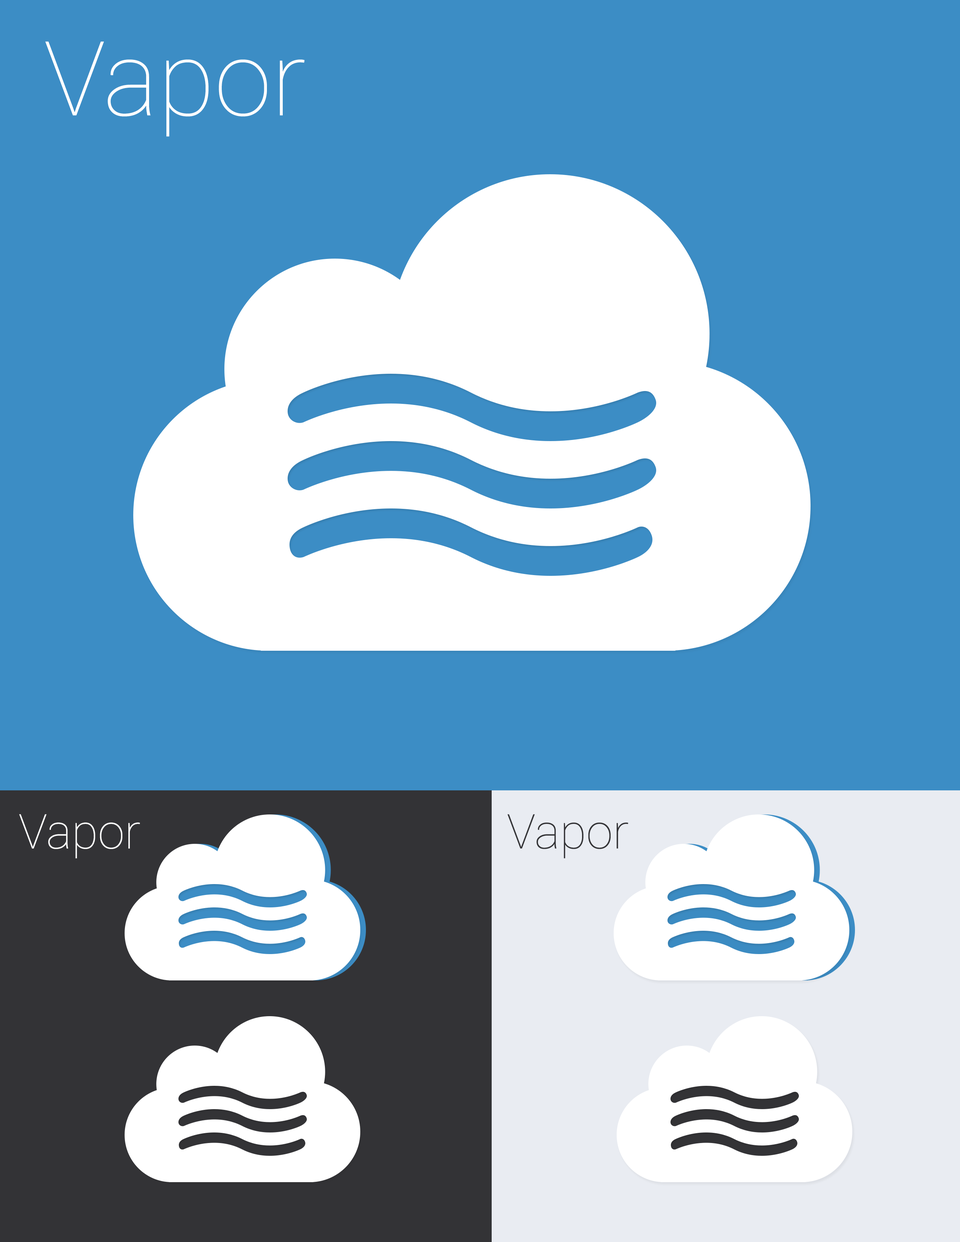
<style>
.page{position:relative;width:960px;height:1242px;background:#3c8dc5}
.page>*{position:absolute;margin:0}
.t1{font:103.6px "Roboto-Thin";color:#ffffff}
.t2{font:48.1px "Roboto-Thin";color:#ffffff}
.t3{font:48.1px "Roboto-Thin";color:#333336}
</style>
<div class="page">
<p class="t1" style="left:45px;top:41px;width:260px;height:96px">Vapor</p>
<p class="t2" style="left:19px;top:814px;width:121px;height:45px">Vapor</p>
<p class="t3" style="left:507px;top:814px;width:121px;height:45px">Vapor</p>
</div>
